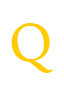
<style>
.page{position:relative;width:64px;height:96px;background:#ffffff}
.page>*{position:absolute;margin:0}
.t1{font:58.3px "Athelas-Regular";color:#ffcc01}
</style>
<div class="page">
<p class="t1" style="left:11px;top:23px;width:42px;height:50px">Q</p>
</div>
